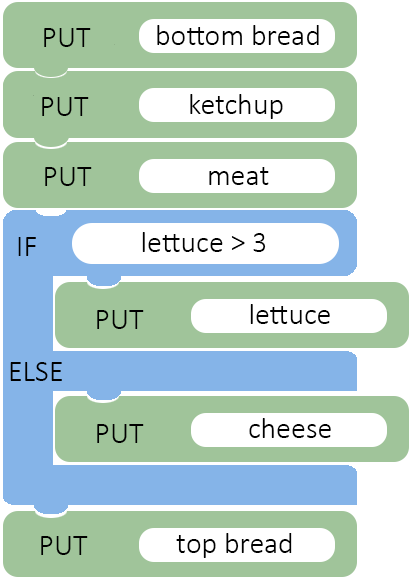
<style>
.page{position:relative;width:409px;height:577px;background:#a0c49a}
.page>*{position:absolute;margin:0}
.t1{font:30px "Calibri-Light";color:#000000}
.t2{font:30px "Calibri-Light"}
</style>
<div class="page">
<p class="t1" style="left:44px;top:28px;width:47px;height:19px">PUT</p>
<p class="t1" style="left:157px;top:25px;width:162px;height:20px">bottom bread</p>
<p class="t2" style="left:41px;top:97px;width:47px;height:19px">PUT</p>
<p class="t1" style="left:42px;top:97px;width:47px;height:19px">PUT</p>
<p class="t1" style="left:190px;top:94px;width:93px;height:25px">ketchup</p>
<p class="t1" style="left:45px;top:167px;width:47px;height:19px">PUT</p>
<p class="t1" style="left:209px;top:167px;width:60px;height:18px">meat</p>
<p class="t1" style="left:142px;top:232px;width:124px;height:20px">lettuce &gt; 3</p>
<p class="t1" style="left:18px;top:237px;width:18px;height:19px">IF</p>
<p class="t1" style="left:250px;top:304px;width:80px;height:20px">lettuce</p>
<p class="t1" style="left:97px;top:310px;width:47px;height:19px">PUT</p>
<p class="t1" style="left:10px;top:362px;width:52px;height:19px">ELSE</p>
<p class="t1" style="left:97px;top:424px;width:47px;height:19px">PUT</p>
<p class="t1" style="left:249px;top:418px;width:82px;height:20px">cheese</p>
<p class="t1" style="left:176px;top:533px;width:116px;height:25px">top bread</p>
<p class="t1" style="left:41px;top:536px;width:47px;height:19px">PUT</p>
</div>
